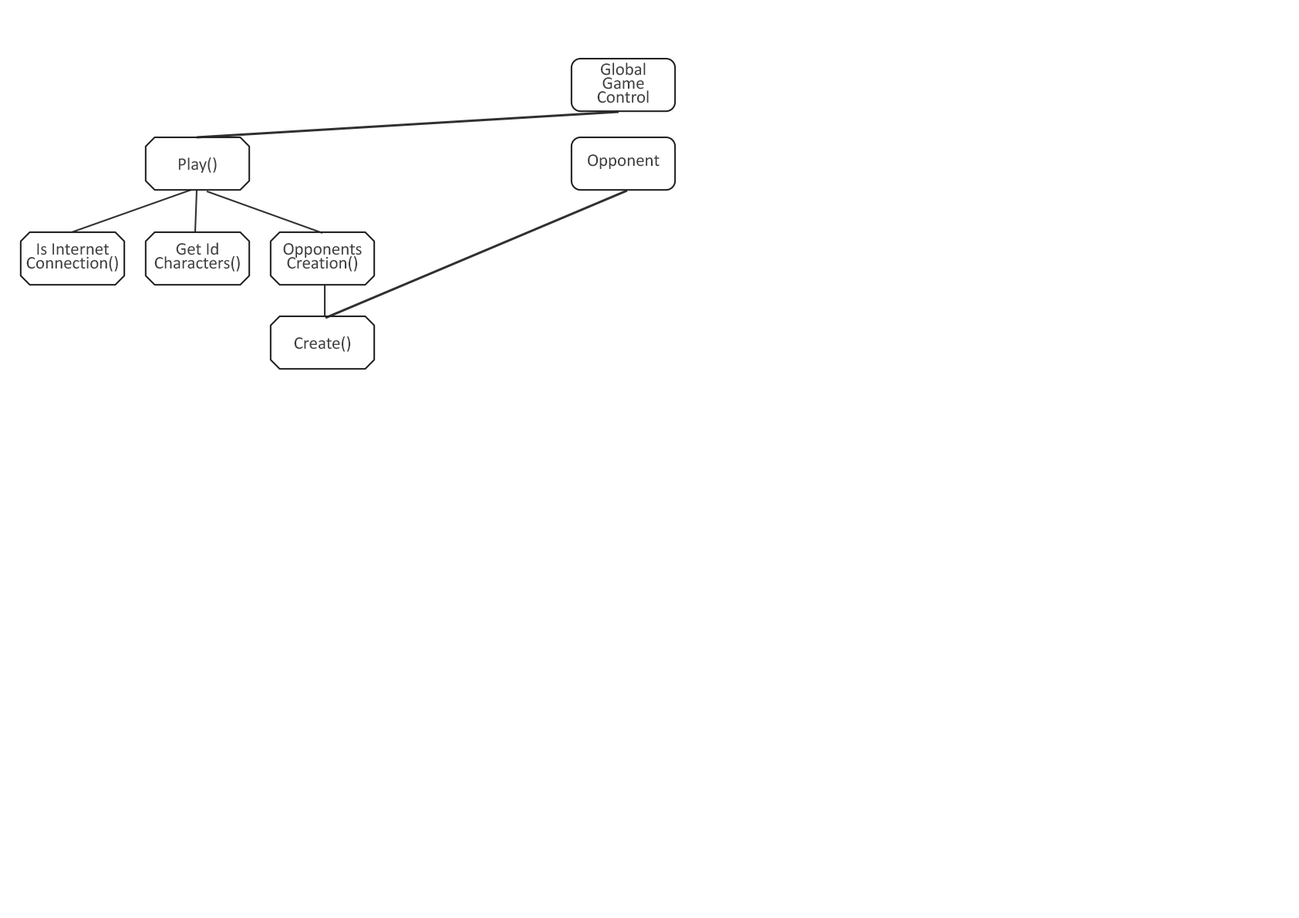
<style>
.page{position:relative;width:1299px;height:918px;background:#ffffff}
.page>*{position:absolute;margin:0}
.t1{font:17.8px/14px "Calibri";color:#3c3c3c}
.t2{font:17.8px "Calibri";color:#3c3c3c}
</style>
<div class="page">
<p class="t1" style="left:597px;top:62px;width:52px;height:41px;text-align:center">Global<br>Game<br>Control</p>
<p class="t2" style="left:178px;top:157px;width:39px;height:17px">Play()</p>
<p class="t2" style="left:588px;top:154px;width:72px;height:16px">Opponent</p>
<p class="t2" style="left:26px;top:243px;width:92px;height:29px">Is Internet Connection()</p>
<p class="t1" style="left:154px;top:242px;width:86px;height:30px;text-align:center">Get Id<br>Characters()</p>
<p class="t1" style="left:283px;top:243px;width:79px;height:29px;text-align:center">Opponents<br>Creation()</p>
<p class="t2" style="left:294px;top:336px;width:57px;height:16px">Create()</p>
</div>
